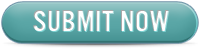
<style>
.page{position:relative;width:201px;height:52px}
.page>*{position:absolute;margin:0}
.t1{font:31px "U.S.101";letter-spacing:0.02em;color:#ffffff;text-transform:uppercase}
</style>
<div class="page">
<p class="t1" style="left:33px;top:10px;width:136px;height:21px">submit now</p>
</div>
